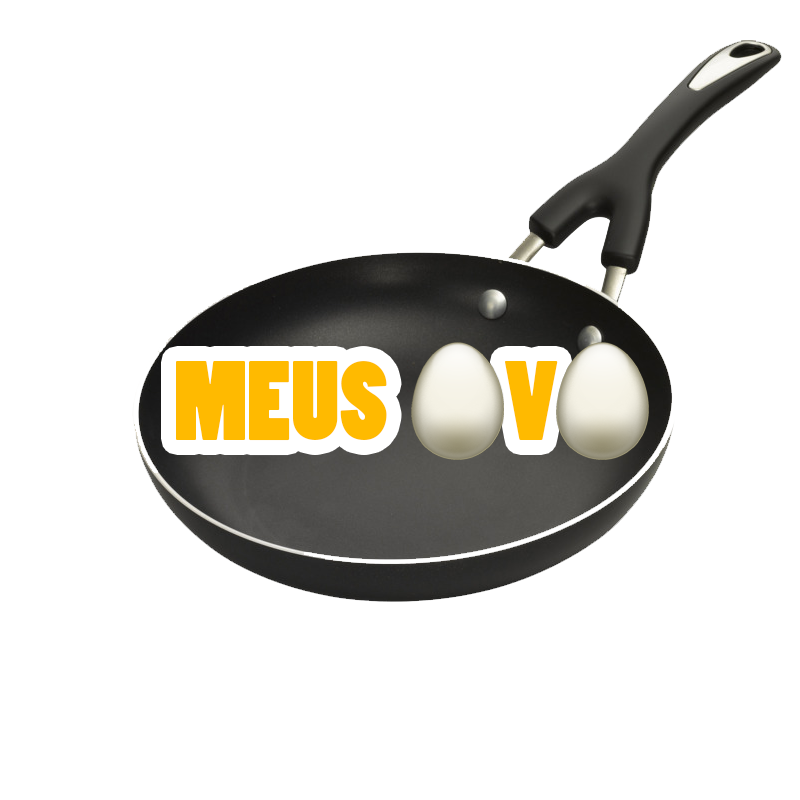
<style>
.page{position:relative;width:800px;height:800px;background:#ffffff}
.page>*{position:absolute;margin:0}
.t1{font:105.8px "PoplarStd";color:#ffba00}
</style>
<div class="page">
<p class="t1" style="left:176px;top:361px;width:382px;height:80px">MEUS           V</p>
</div>
